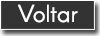
<style>
.page{position:relative;width:100px;height:36px;background:#333333}
.page>*{position:absolute;margin:0}
.t1{font:24px "Arcon-Regular";color:#ffffff}
</style>
<div class="page">
<p class="t1" style="left:18px;top:4px;width:60px;height:19px">Voltar</p>
</div>
